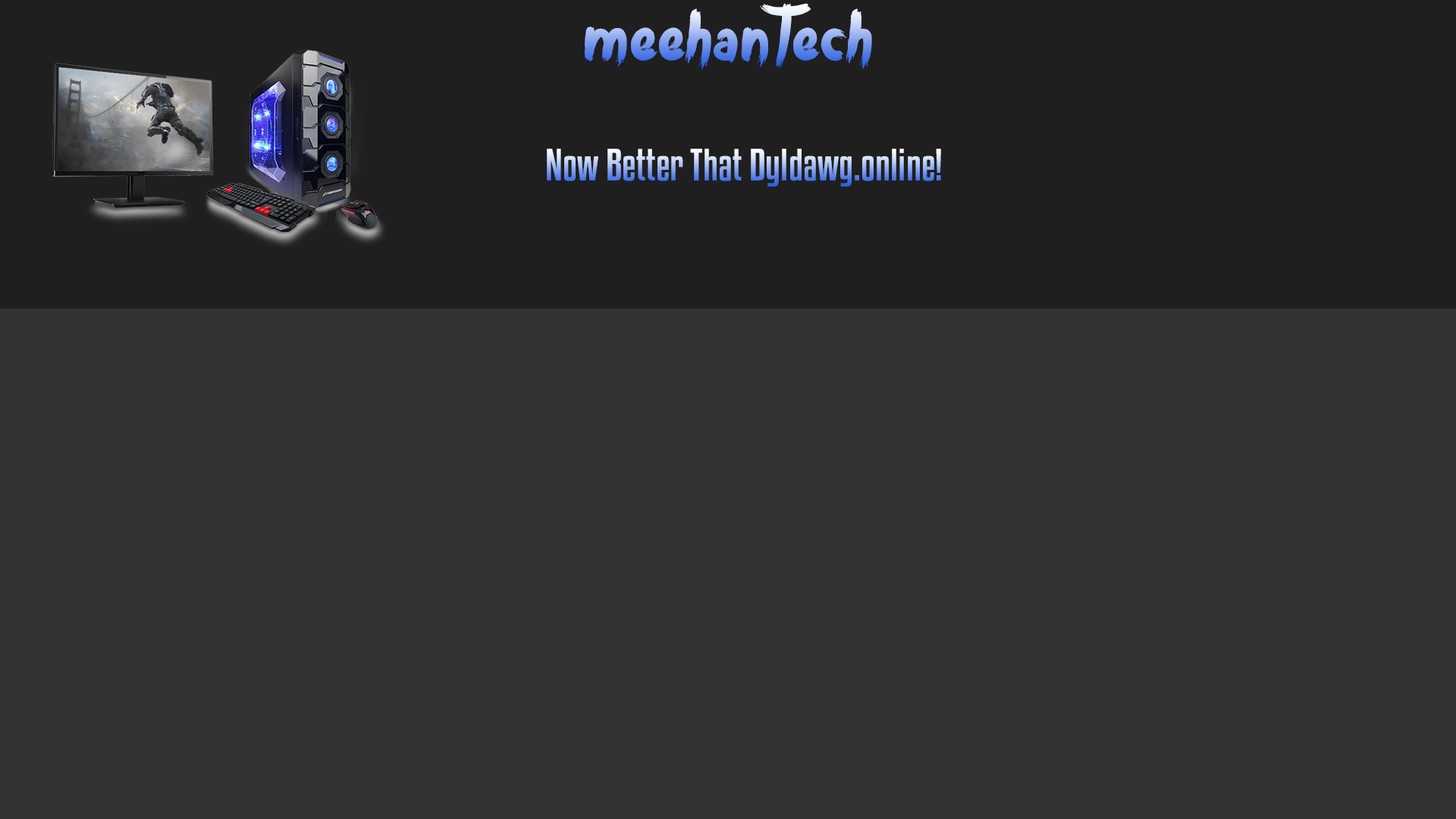
<style>
.page{position:relative;width:1456px;height:819px;background:#333333}
.page>*{position:absolute;margin:0}
.t1{font:81.1px "Bulldozer"}
.t2{font:40.2px "KenyanCoffeeRg-Regular"}
</style>
<div class="page">
<p class="t1" style="left:585px;top:3px;width:287px;height:67px">meehanTech</p>
<p class="t2" style="left:547px;top:149px;width:394px;height:38px">Now Better That Dyldawg.online!</p>
</div>
